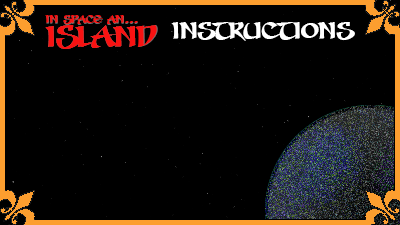
<style>
.page{position:relative;width:400px;height:225px;background:#000000}
.page>*{position:absolute;margin:0}
.t1{font:13px "SevenSwordsmenBB";color:#f81212}
.t2{font:13px "SevenSwordsmenBB"}
.t3{font:34.7px "SevenSwordsmenBB";color:#f81212}
.t4{font:27px "SevenSwordsmenBB";color:#ffffff}
</style>
<div class="page">
<p class="t1" style="left:45px;top:15px;width:93px;height:9px">in space an...</p>
<p class="t2" style="left:46px;top:16px;width:92px;height:9px">in space an...</p>
<p class="t3" style="left:45px;top:25px;width:113px;height:24px">ISLAND</p>
<p class="t3" style="left:45px;top:25px;width:112px;height:24px">ISLAND</p>
<p class="t4" style="left:171px;top:22px;width:184px;height:19px">INSTRUCTIONS</p>
</div>
